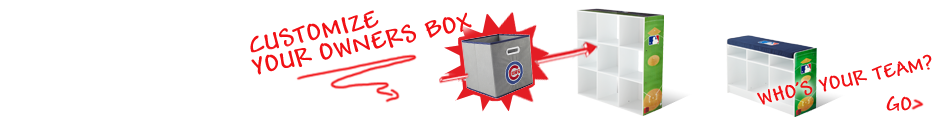
<style>
.page{position:relative;width:945px;height:122px;background:#ffffff}
.page>*{position:absolute;margin:0}
.t1{font:26.1px "Andy-Bold";letter-spacing:0.025em;color:#f11014}
.t2{font:21px "Andy-Bold";letter-spacing:0.025em;color:#f11014}
.t3{font:20.7px "Andy-Bold";letter-spacing:0.025em;color:#f11014}
</style>
<div class="page">
<p class="t1" style="left:250px;top:10px;width:129px;height:43px;rotate:-12deg">CUSTOMIZE</p>
<p class="t1" style="left:251px;top:12px;width:221px;height:63px;rotate:-12deg">YOUR OWNERS BOX</p>
<p class="t2" style="left:757px;top:54px;width:175px;height:51px;rotate:-12deg">WHO’S YOUR TEAM?</p>
<p class="t3" style="left:886px;top:96px;width:26px;height:15px">GO</p>
</div>
